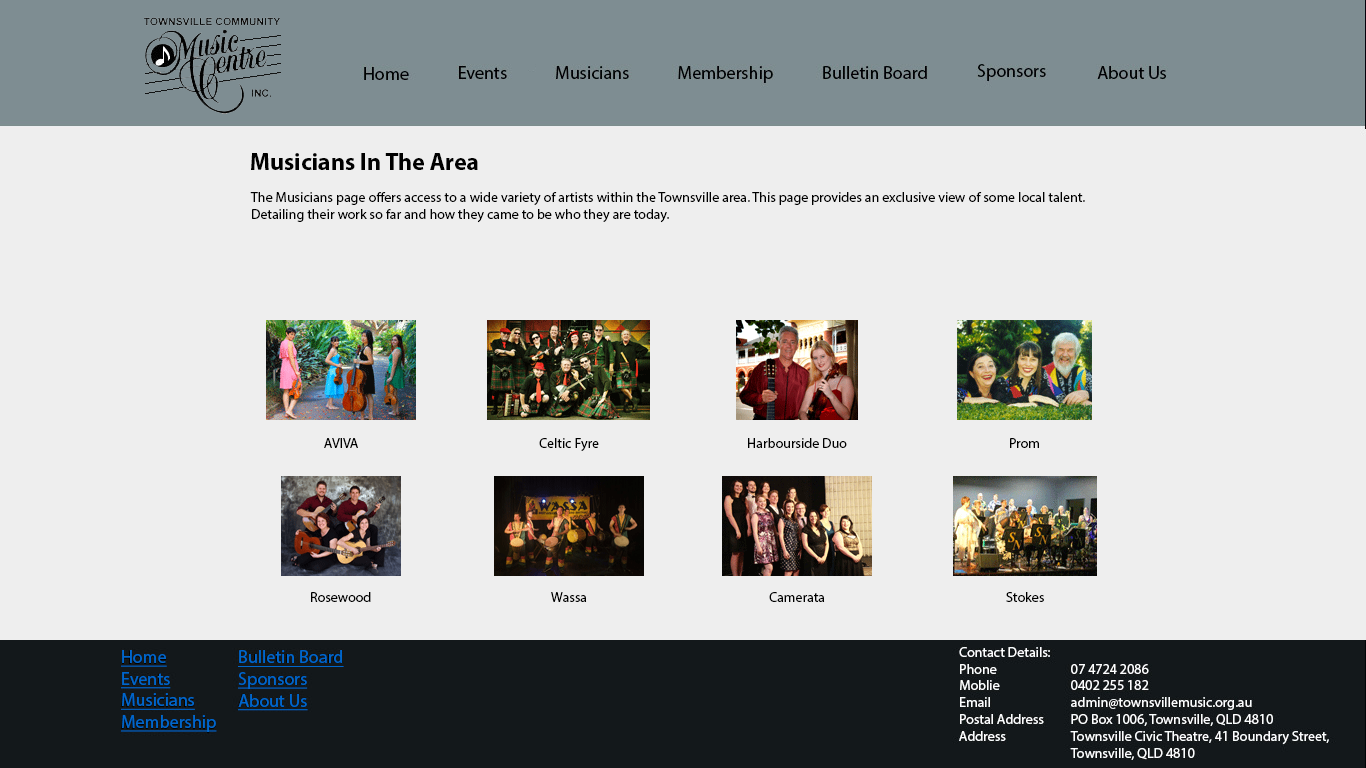
<style>
.page{position:relative;width:1366px;height:768px;background:#eeeeee}
.page>*{position:absolute;margin:0}
.t1{font:24px "MyriadPro-Bold";color:#000000}
.t2{font:14px "MyriadPro-Regular";color:#000000}
.t3{font:18px "MyriadPro-Regular";color:#0066cc;text-decoration:underline}
</style>
<div class="page">
<p class="t1" style="left:251px;top:153px;width:227px;height:17px">Musicians In The Area</p>
<p class="t2" style="left:250px;top:192px;width:835px;height:31px">The Musicians page offers access to a wide variety of artists within the Townsville area. This page provides an exclusive view of some local talent. <br>Detailing their work so far and how they came to be who they are today.</p>
<p class="t2" style="left:324px;top:438px;width:34px;height:10px">AVIVA</p>
<p class="t2" style="left:539px;top:438px;width:60px;height:13px">Celtic Fyre</p>
<p class="t2" style="left:748px;top:438px;width:99px;height:10px">Harbourside Duo</p>
<p class="t2" style="left:1010px;top:438px;width:29px;height:10px">Prom</p>
<p class="t2" style="left:311px;top:592px;width:60px;height:10px">Rosewood</p>
<p class="t2" style="left:551px;top:592px;width:36px;height:10px">Wassa</p>
<p class="t2" style="left:769px;top:592px;width:56px;height:10px">Camerata</p>
<p class="t2" style="left:1006px;top:592px;width:38px;height:10px">Stokes</p>
<p class="t3" style="left:121px;top:650px;width:96px;height:82px">Home<br>Events<br>Musicians<br>Membership</p>
<p class="t3" style="left:238px;top:650px;width:106px;height:61px">Bulletin Board<br>Sponsors<br>About Us</p>
</div>
